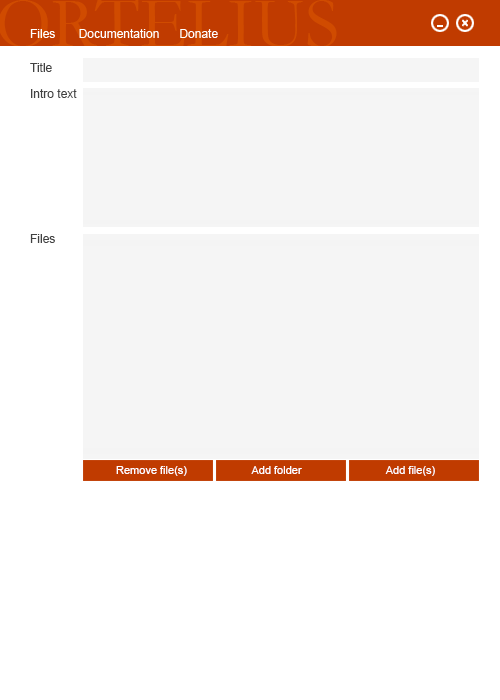
<style>
.page{position:relative;width:500px;height:700px;background:#ffffff}
.page>*{position:absolute;margin:0}
.t1{font:72px "Garamond";color:#d04b00}
.t2{font:12px "ArialMT";color:#ffffff}
.t3{font:12px "ArialMT";color:#424242}
.t4{font:11px "ArialMT";color:#ffffff}
</style>
<div class="page">
<p class="t1" style="left:0px;top:0px;width:337px;height:47px">ORTELIUS</p>
<p class="t2" style="left:30px;top:29px;width:188px;height:9px">Files       Documentation      Donate</p>
<p class="t3" style="left:30px;top:63px;width:22px;height:9px">Title</p>
<p class="t3" style="left:31px;top:89px;width:46px;height:9px">Intro text</p>
<p class="t3" style="left:30px;top:234px;width:25px;height:9px">Files</p>
<p class="t4" style="left:116px;top:466px;width:71px;height:10px">Remove file(s)</p>
<p class="t4" style="left:251px;top:466px;width:51px;height:8px">Add folder</p>
<p class="t4" style="left:385px;top:466px;width:50px;height:10px">Add file(s)</p>
</div>
